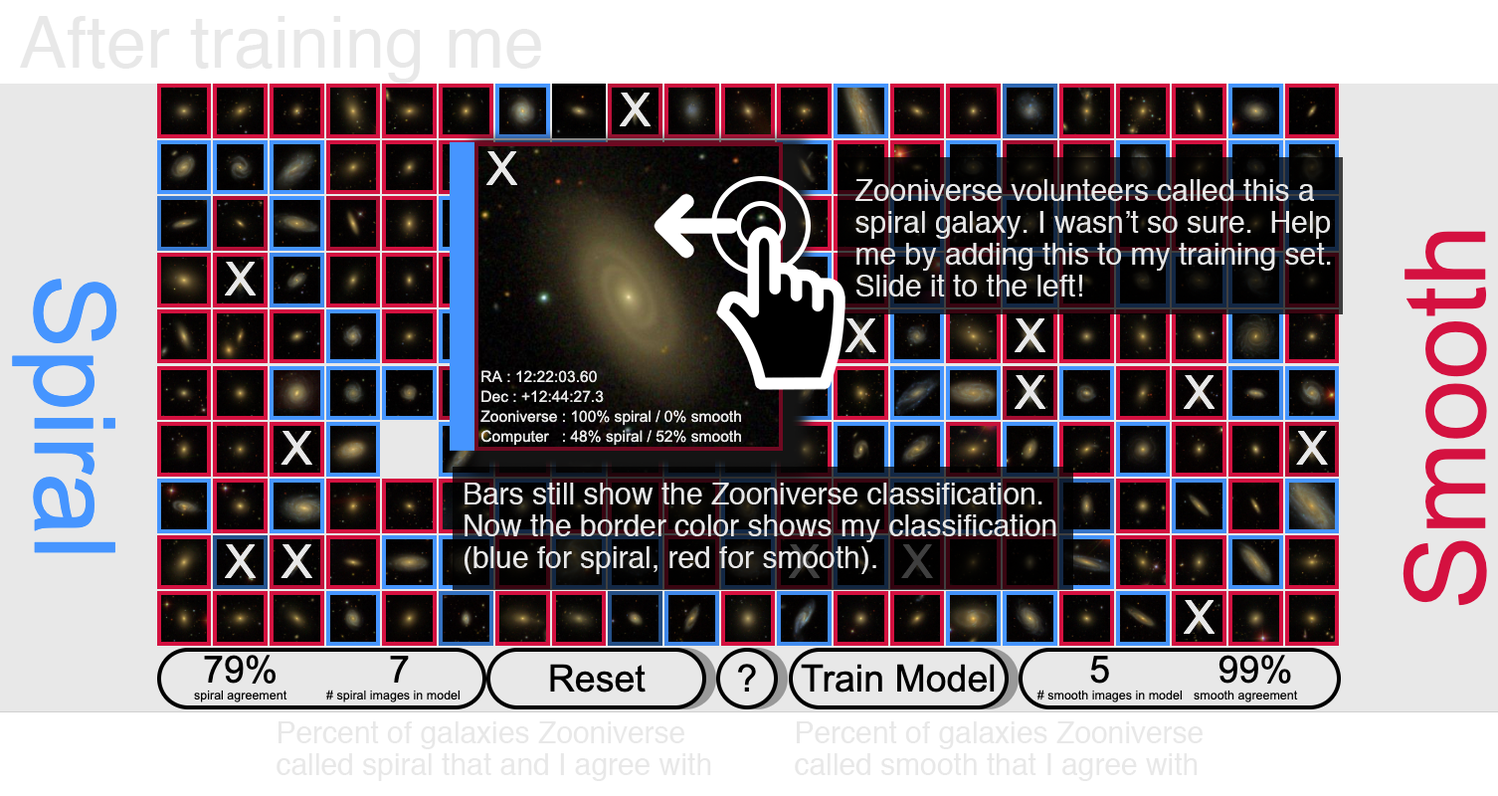
<style>
.page{position:relative;width:1498px;height:796px;background:#ffffff}
.page>*{position:absolute;margin:0}
.t1{font:71.6px "Helvetica";color:#e8e8e8}
.t2{font:29.8px/31.8px "Helvetica";color:#e8e8e8}
</style>
<div class="page">
<p class="t1" style="left:20px;top:16px;width:521px;height:68px">After training me</p>
<p class="t2" style="left:856px;top:179px;width:475px;height:117px">Zooniverse volunteers called this a <br>spiral galaxy. I wasn’t so sure.  Help <br>me by adding this to my training set.<br>Slide it to the left!</p>
<p class="t2" style="left:465px;top:483px;width:592px;height:91px">Bars still show the Zooniverse classification.  <br>Now the border color shows my classification <br>(blue for spiral, red for smooth).</p>
<p class="t2" style="left:277px;top:721px;width:434px;height:60px">Percent of galaxies Zooniverse <br>called spiral that and I agree with</p>
<p class="t2" style="left:795px;top:721px;width:408px;height:60px">Percent of galaxies Zooniverse<br>called smooth that I agree with</p>
</div>
